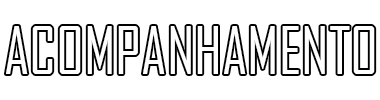
<style>
.page{position:relative;width:380px;height:100px;background:#ffffff}
.page>*{position:absolute;margin:0}
.t1{font:63px "AgencyFB-Reg";color:#ffffff}
</style>
<div class="page">
<p class="t1" style="left:6px;top:26px;width:369px;height:48px">ACOMPANHAMENTO</p>
</div>
